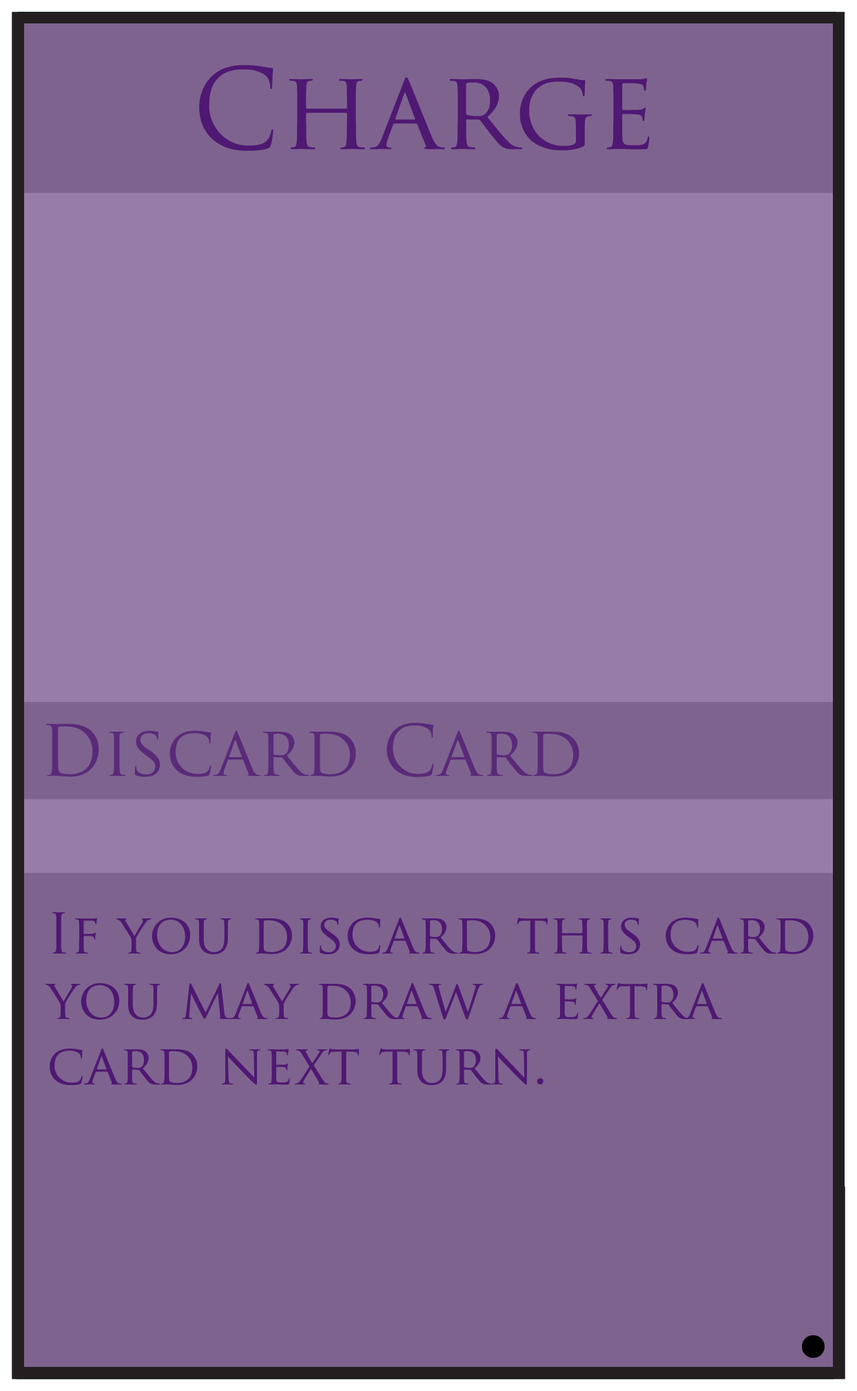
<style>
.page{position:relative;width:857px;height:1391px;background:#7e638f}
.page>*{position:absolute;margin:0}
.t1{font:109.1px "TrajanPro-Regular";color:#4f1872}
.t2{font:68.9px "TrajanPro-Regular";color:#5a2a79}
.t3{font:54.5px "TrajanPro-Regular";color:#4f1872}
</style>
<div class="page">
<p class="t1" style="left:199px;top:65px;width:451px;height:86px">Charge</p>
<p class="t2" style="left:46px;top:723px;width:533px;height:54px">Discard Card</p>
<p class="t3" style="left:45px;top:912px;width:769px;height:173px">If you discard this card<br>you may draw a extra <br>card next turn.</p>
</div>
